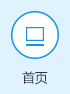
<style>
.page{position:relative;width:70px;height:94px;background:#def2ff}
.page>*{position:absolute;margin:0}
.t1{font:13px "MicrosoftYaHei";color:#323232}
</style>
<div class="page">
<p class="t1" style="left:22px;top:71px;width:26px;height:14px">首页</p>
</div>
